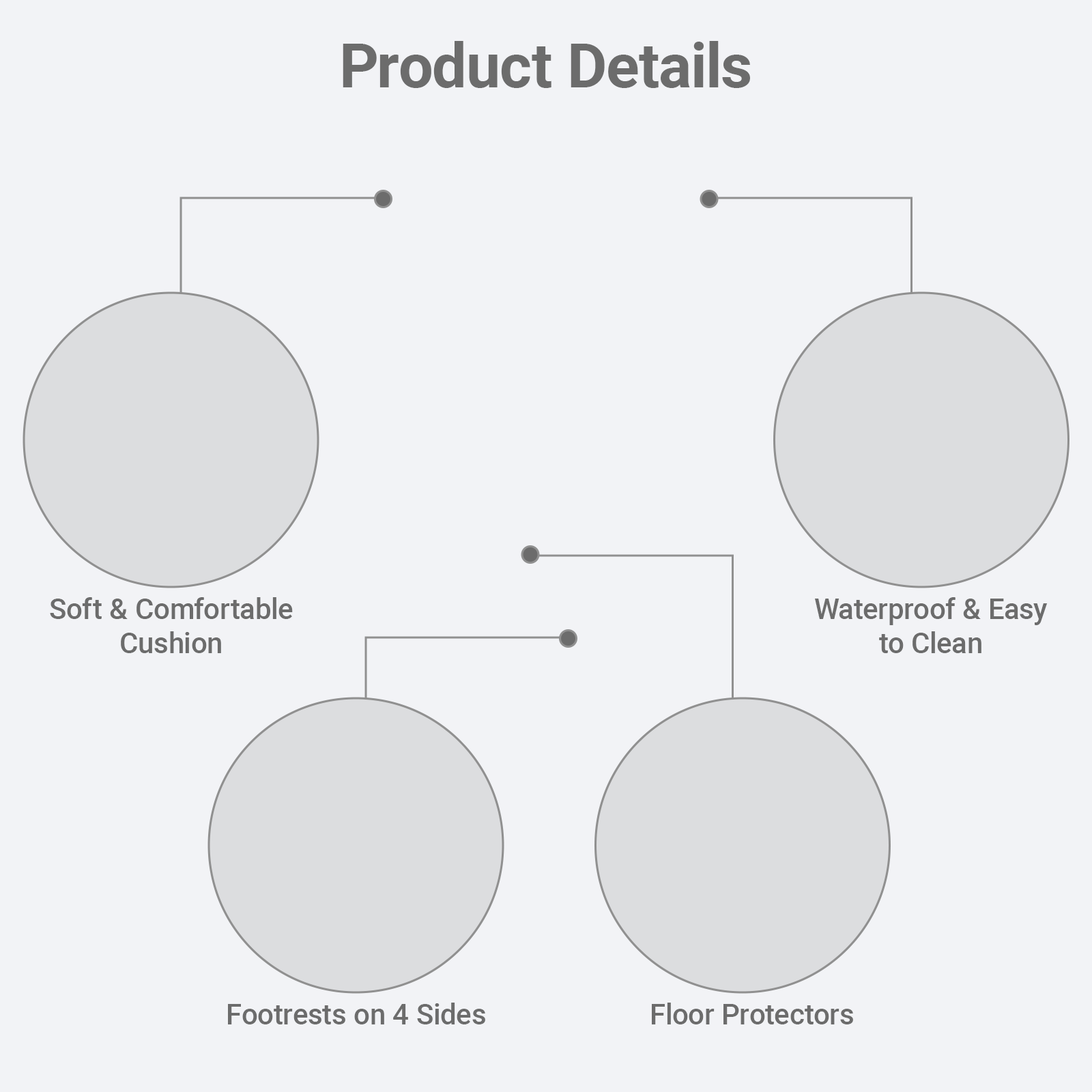
<style>
.page{position:relative;width:1092px;height:1092px;background:#f2f3f6}
.page>*{position:absolute;margin:0}
.t1{font:61.4px "Roboto-Bold";color:#6c6c6c}
.t2{font:28.7px "Roboto-Medium";color:#6c6c6c}
</style>
<div class="page">
<p class="t1" style="left:343px;top:41px;width:407px;height:47px">Product Details</p>
<p class="t2" style="left:50px;top:597px;width:243px;height:56px;text-align:center">Soft &amp; Comfortable<br>Cushion</p>
<p class="t2" style="left:815px;top:597px;width:233px;height:56px;text-align:center">Waterproof &amp; Easy<br>to Clean</p>
<p class="t2" style="left:228px;top:1003px;width:257px;height:21px">Footrests on 4 Sides</p>
<p class="t2" style="left:652px;top:1003px;width:201px;height:21px">Floor Protectors</p>
</div>
